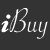
<style>
.page{position:relative;width:50px;height:50px;background:#333333}
.page>*{position:absolute;margin:0}
.t1{font:36px "SavoyeLetPlain";color:#ffffff}
.t2{font:24px "HoeflerText-BlackItalic";color:#ffffff}
</style>
<div class="page">
<p class="t1" style="left:1px;top:8px;width:47px;height:31px"><span class="t2">i</span>Buy</p>
</div>
